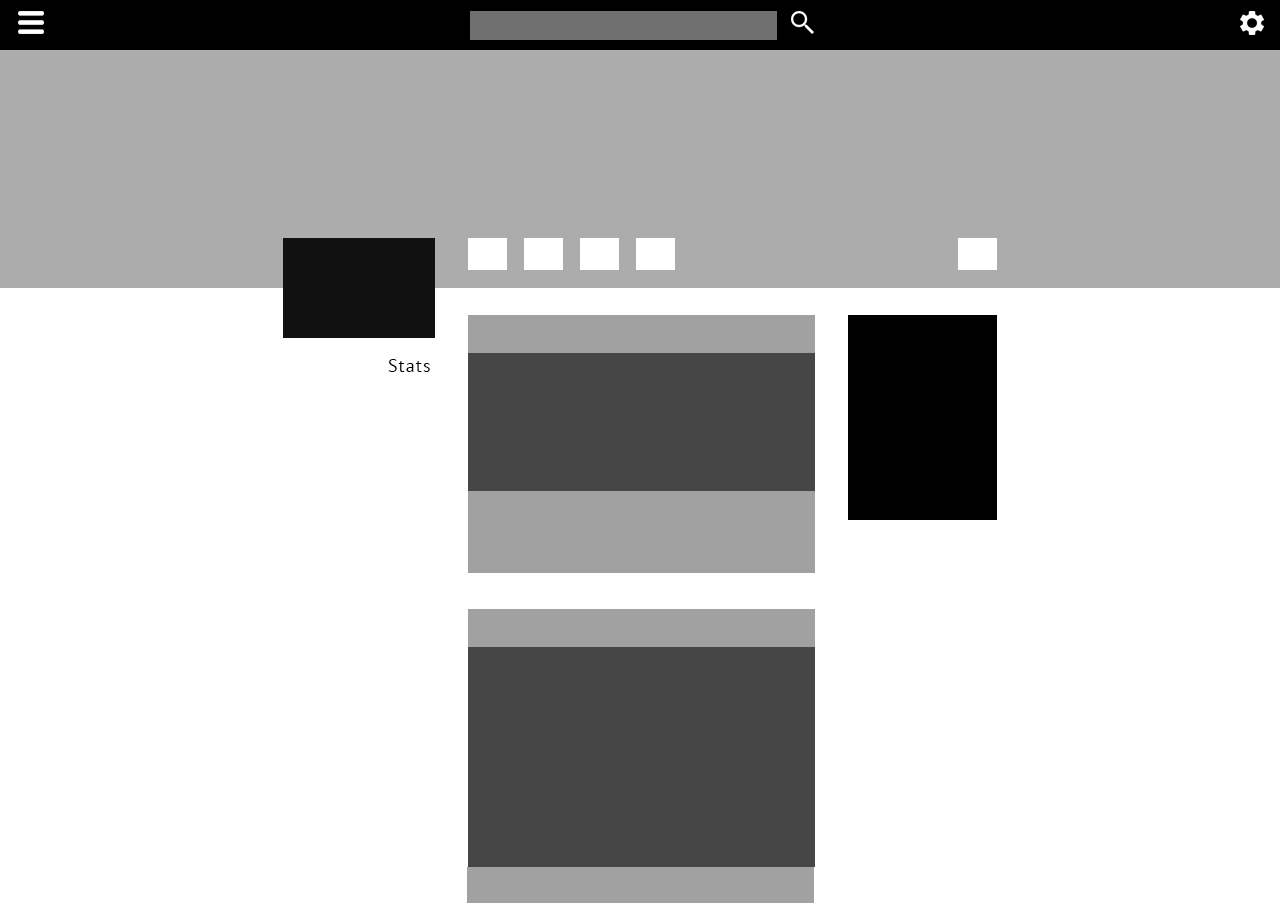
<style>
.page{position:relative;width:1280px;height:903px;background:#ffffff}
.page>*{position:absolute;margin:0}
.t1{font:18px "PTSans-Regular";letter-spacing:0.06em;color:#000000}
</style>
<div class="page">
<p class="t1" style="left:388px;top:359px;width:42px;height:13px">Stats</p>
</div>
